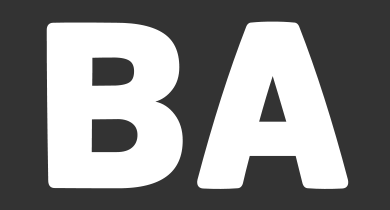
<style>
.page{position:relative;width:390px;height:210px;background:#333333}
.page>*{position:absolute;margin:0}
.t1{font:236px "HabaneraRounded-Black";color:#ffffff;scale:0.9 1}
</style>
<div class="page">
<p class="t1" style="left:46px;top:21px;width:303px;height:168px">BA</p>
</div>
